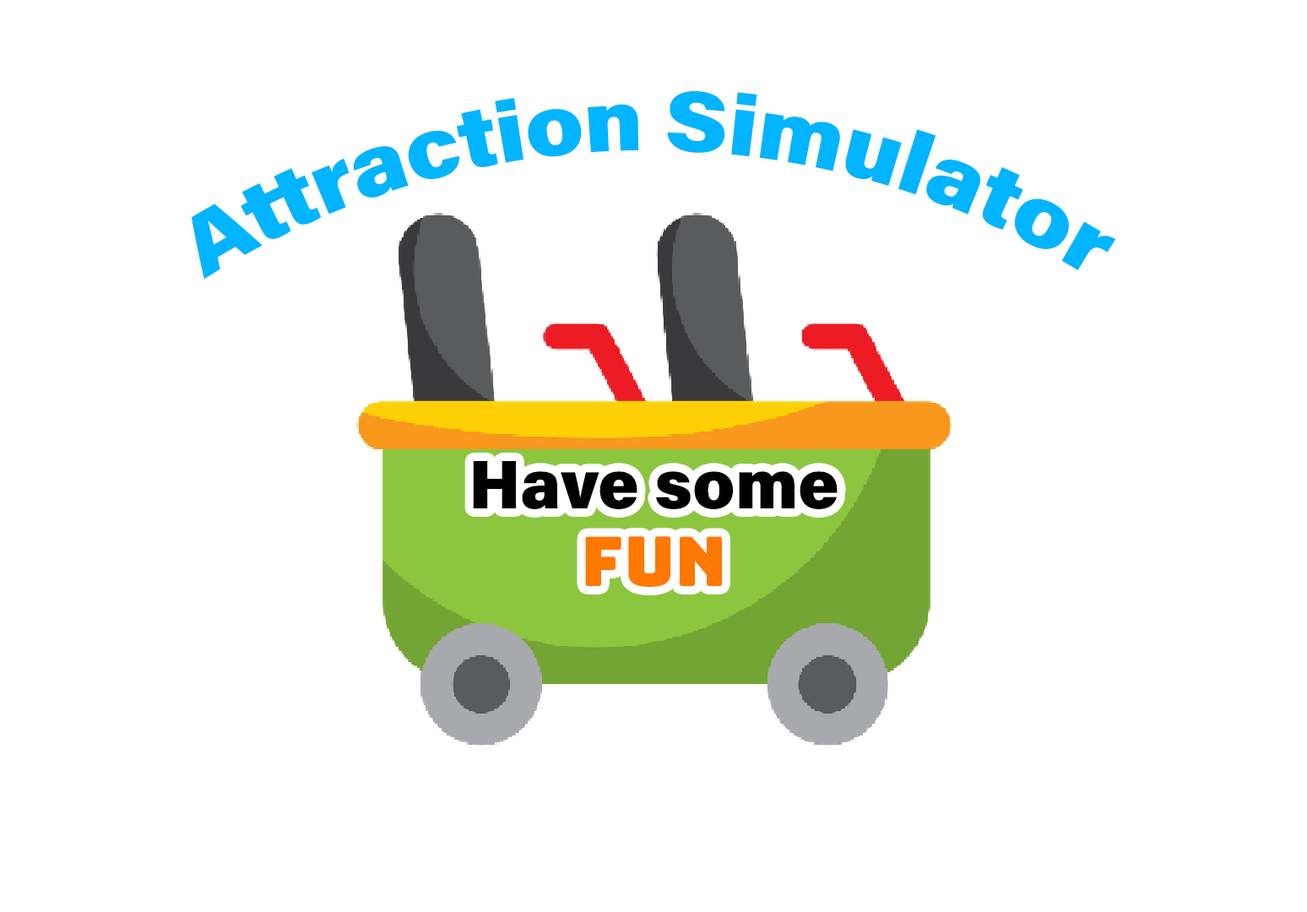
<style>
.page{position:relative;width:1307px;height:912px;background:#ffffff}
.page>*{position:absolute;margin:0}
.t1{font:86.1px "AcuminConcept-Black";color:#00b4ff}
.t2{font:68.7px "AcuminConcept-Black";color:#000000}
.t3{font:68.7px "Bungee-Regular";color:#ff7800}
</style>
<div class="page">
<p class="t1" style="left:191px;top:90px;width:925px;height:190px;text-align:center">Attraction Simulator</p>
<p class="t2" style="left:473px;top:461px;width:365px;height:126px;text-align:center">Have some <span class="t3">fun</span></p>
</div>
